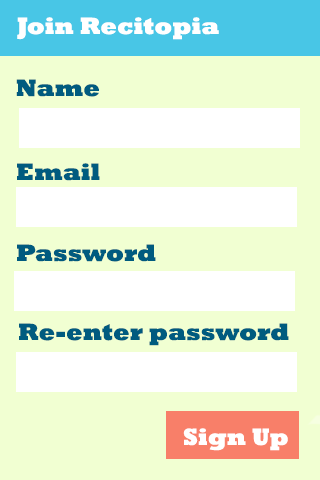
<style>
.page{position:relative;width:320px;height:480px;background:#f1ffd2}
.page>*{position:absolute;margin:0}
.t1{font:24px "Rockwell-ExtraBold";color:#ffffff}
.t2{font:24px "Rockwell-ExtraBold";color:#005b7f}
</style>
<div class="page">
<p class="t1" style="left:17px;top:17px;width:202px;height:23px">Join Recitopia</p>
<p class="t2" style="left:16px;top:79px;width:83px;height:18px">Name</p>
<p class="t2" style="left:17px;top:163px;width:83px;height:18px">Email</p>
<p class="t2" style="left:17px;top:244px;width:139px;height:18px">Password</p>
<p class="t2" style="left:19px;top:323px;width:270px;height:23px">Re-enter password</p>
<p class="t1" style="left:183px;top:428px;width:105px;height:23px">Sign Up</p>
</div>
